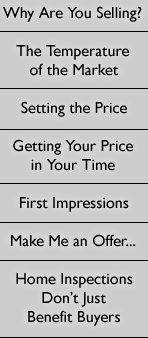
<style>
.page{position:relative;width:148px;height:338px;background:#cccccc}
.page>*{position:absolute;margin:0}
.t1{font:16px/19px "GillSansMT";color:#000000}
</style>
<div class="page">
<p class="t1" style="left:3px;top:6px;width:139px;height:320px;text-align:center">Why Are You Selling?<br><br>The Temperature<br>of the Market<br><br>Setting the Price<br><br>Getting Your Price<br>in Your Time<br><br>First Impressions<br><br>Make Me an Offer...<br><br>Home Inspections<br>Don’t Just<br>Benefit Buyers</p>
</div>
